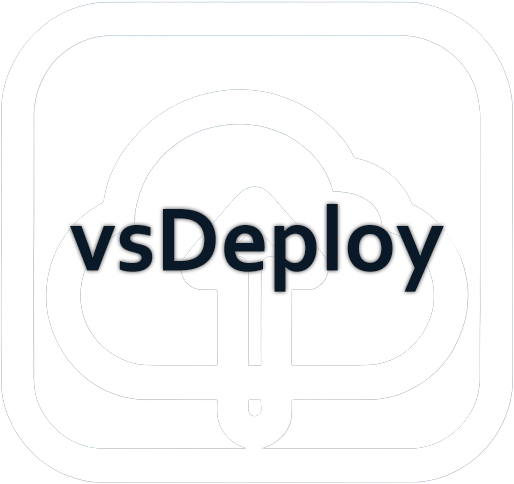
<style>
.page{position:relative;width:514px;height:484px;background:#ffffff}
.page>*{position:absolute;margin:0}
.t1{font:94px "Corbel-Bold";color:#091928}
</style>
<div class="page">
<p class="t1" style="left:70px;top:204px;width:374px;height:88px">vsDeploy</p>
</div>
